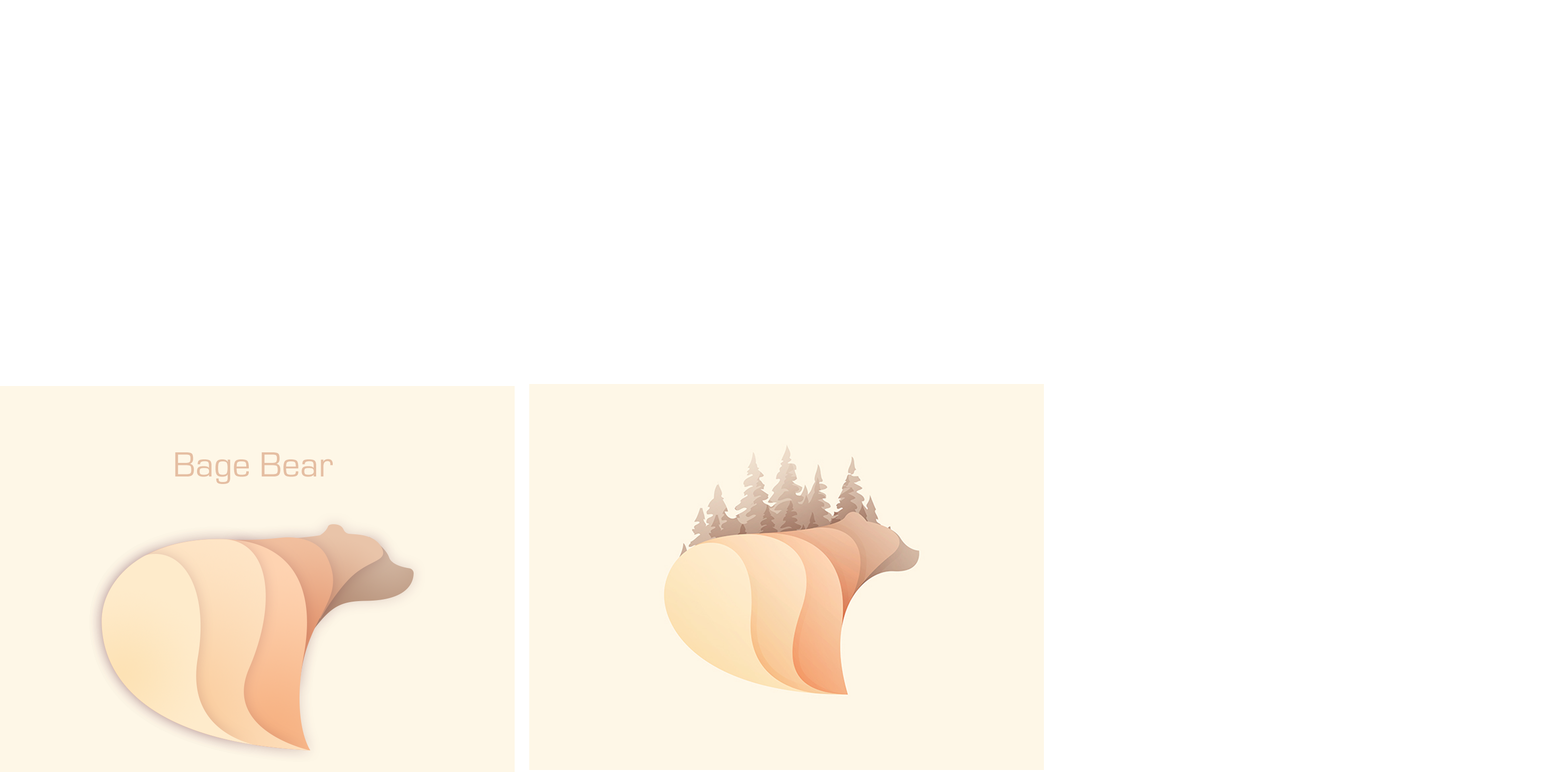
<style>
.page{position:relative;width:1544px;height:772px;background:#ffffff}
.page>*{position:absolute;margin:0}
.t1{font:36.2px "EurostileRegular";color:#e5bea2}
</style>
<div class="page">
<p class="t1" style="left:175px;top:452px;width:158px;height:32px">Bage Bear</p>
</div>
